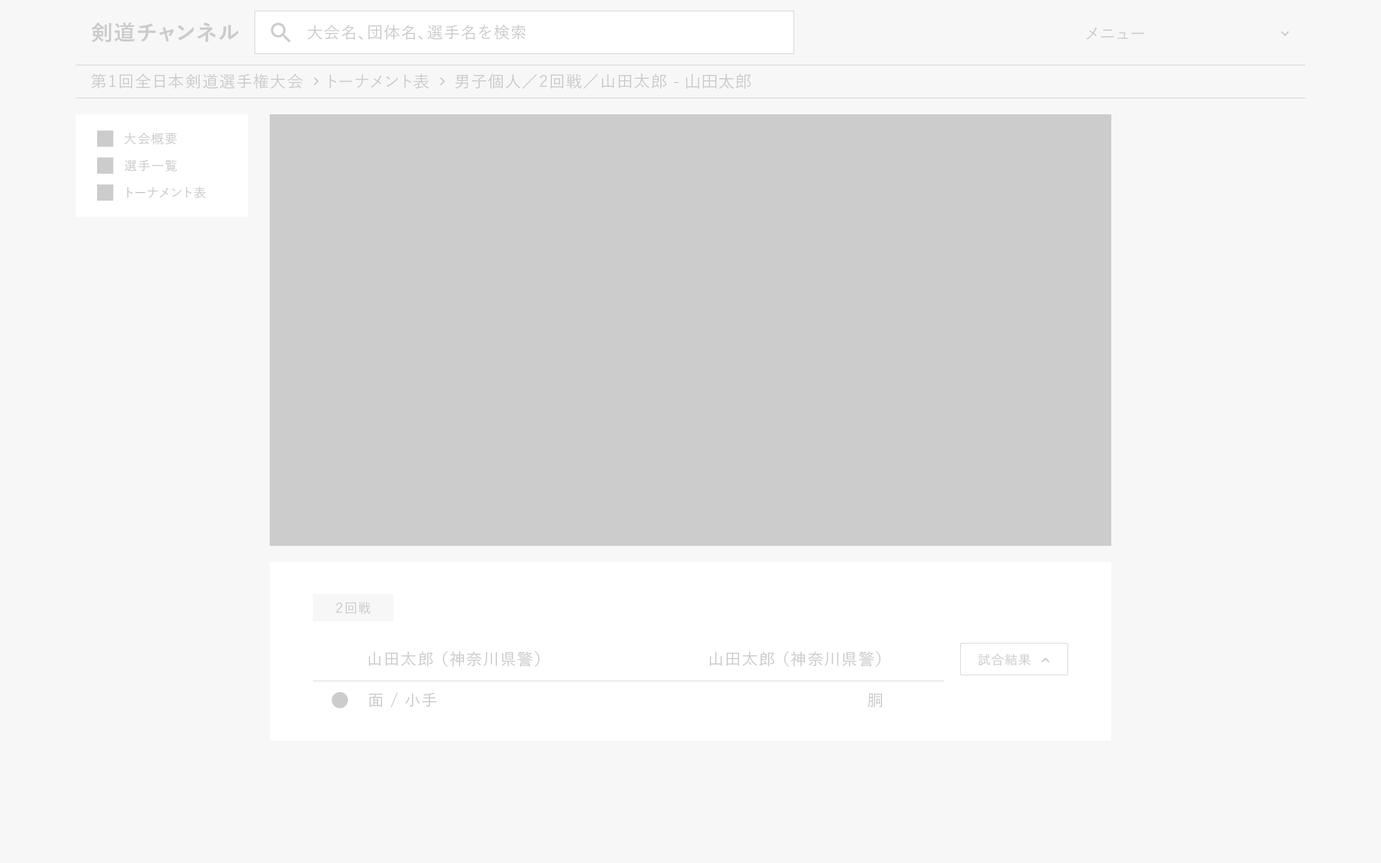
<style>
.page{position:relative;width:1381px;height:863px;background:#f7f7f7}
.page>*{position:absolute;margin:0}
.t1{font:21.6px "YuGo-Bold";letter-spacing:0.05em;color:#cccccc}
.t2{font:16.2px "YuGo-Medium";letter-spacing:0.05em;color:#cccccc}
.t3{font:16.2px "KozGoPr6N-Regular";letter-spacing:0.05em;color:#cccccc}
.t4{font:12.9px/27px "YuGo-Medium";letter-spacing:0.05em;color:#cccccc}
.t5{font:12.9px "YuGo-Medium";letter-spacing:0.05em;color:#cccccc}
</style>
<div class="page">
<p class="t1" style="left:91px;top:22px;width:148px;height:21px">剣道チャンネル</p>
<p class="t2" style="left:308px;top:24px;width:218px;height:16px">大会名、団体名、選手名を検索</p>
<p class="t2" style="left:1086px;top:27px;width:58px;height:13px">メニュー</p>
<p class="t2" style="left:91px;top:73px;width:212px;height:16px">第1回全日本剣道選手権大会</p>
<p class="t2" style="left:329px;top:73px;width:100px;height:16px">トーナメント表</p>
<p class="t2" style="left:455px;top:73px;width:296px;height:16px">男子個人／2回戦／山田太郎 <span class="t3">- 山田太郎</span></p>
<p class="t4" style="left:124px;top:132px;width:82px;height:67px">大会概要<br>選手一覧<br>トーナメント表</p>
<p class="t5" style="left:336px;top:602px;width:35px;height:13px">２回戦</p>
<p class="t5" style="left:336px;top:602px;width:35px;height:13px">２回戦</p>
<p class="t2" style="left:369px;top:651px;width:171px;height:16px">山田太郎 （神奈川県警）</p>
<p class="t2" style="left:369px;top:651px;width:171px;height:16px">山田太郎 （神奈川県警）</p>
<p class="t2" style="left:710px;top:651px;width:171px;height:16px">山田太郎 （神奈川県警）</p>
<p class="t2" style="left:710px;top:651px;width:171px;height:16px">山田太郎 （神奈川県警）</p>
<p class="t5" style="left:978px;top:653px;width:53px;height:13px">試合結果</p>
<p class="t5" style="left:978px;top:653px;width:53px;height:13px">試合結果</p>
<p class="t2" style="left:369px;top:693px;width:68px;height:15px">面 / 小手</p>
<p class="t2" style="left:868px;top:693px;width:14px;height:15px">胴</p>
</div>
